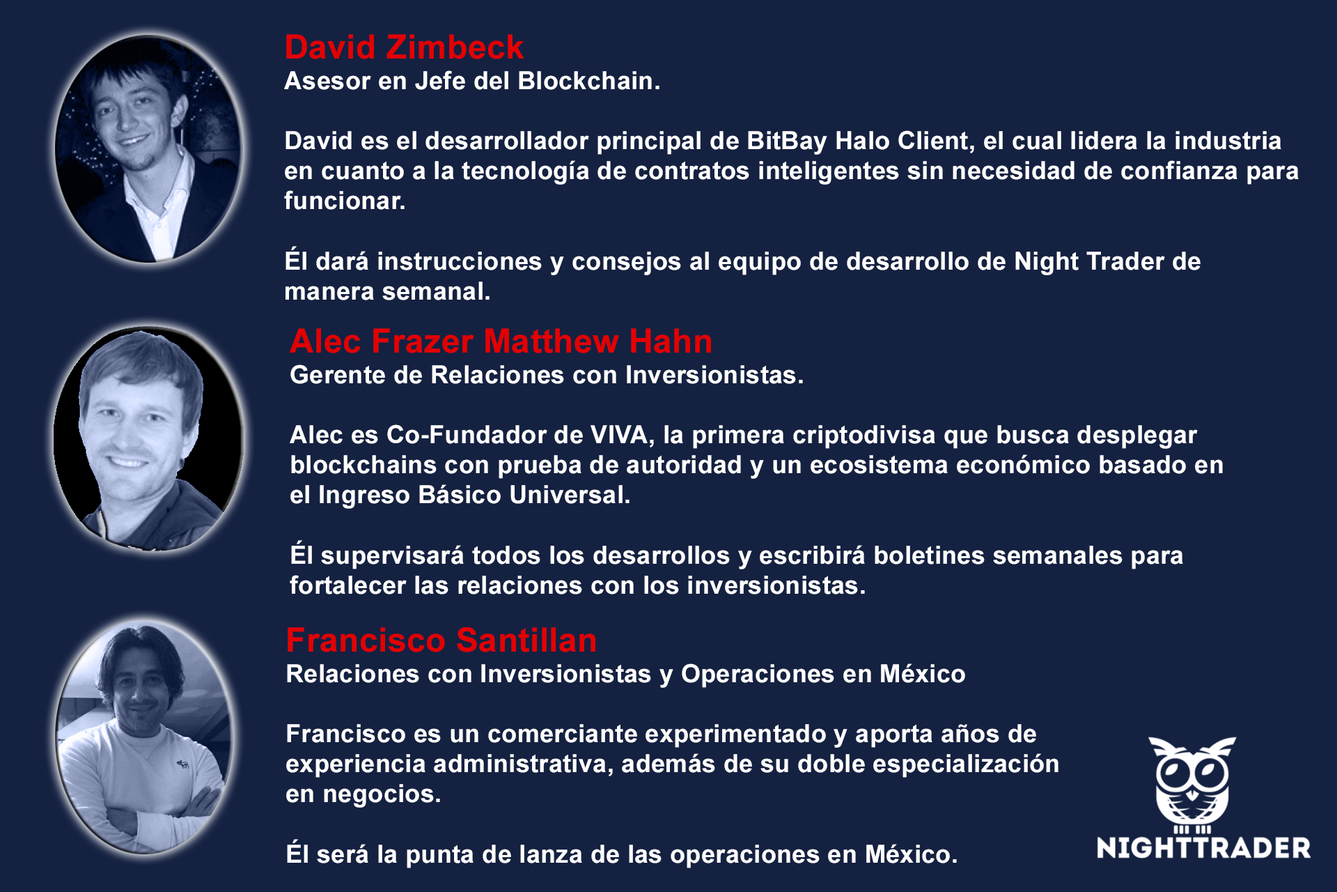
<style>
.page{position:relative;width:1337px;height:892px;background:#142141}
.page>*{position:absolute;margin:0}
.t1{font:25.1px "Arial-BoldMT";letter-spacing:0.01em;color:#ffffff}
.t2{font:33.4px "Arial-BoldMT";letter-spacing:0.01em;color:#e40000}
</style>
<div class="page">
<p class="t1" style="left:284px;top:34px;width:1015px;height:266px"><span class="t2">David Zimbeck<br></span>Asesor en Jefe del Blockchain.<br><br>David es el desarrollador principal de BitBay Halo Client, el cual lidera la industria <br>en cuanto a la tecnología de contratos inteligentes sin necesidad de confianza para <br>funcionar.<br><br>Él dará instrucciones y consejos al equipo de desarrollo de Night Trader de<br>manera semanal.</p>
<p class="t1" style="left:290px;top:328px;width:933px;height:266px"><span class="t2">Alec Frazer Matthew Hahn<br></span>Gerente de Relaciones con Inversionistas. <br><br>Alec es Co-Fundador de VIVA, la primera criptodivisa que busca desplegar<br>blockchains con prueba de autoridad y un ecosistema económico basado en<br>el Ingreso Básico Universal.<br><br>Él supervisará todos los desarrollos y escribirá boletines semanales para<br>fortalecer las relaciones con los inversionistas.</p>
<p class="t1" style="left:286px;top:627px;width:773px;height:241px"><span class="t2">Francisco Santillan<br></span>Relaciones con Inversionistas y Operaciones en México<br><br>Francisco es un comerciante experimentado y aporta años de<br>experiencia administrativa, además de su doble especialización<br>en negocios. <br><br>Él será la punta de lanza de las operaciones en México.</p>
</div>
